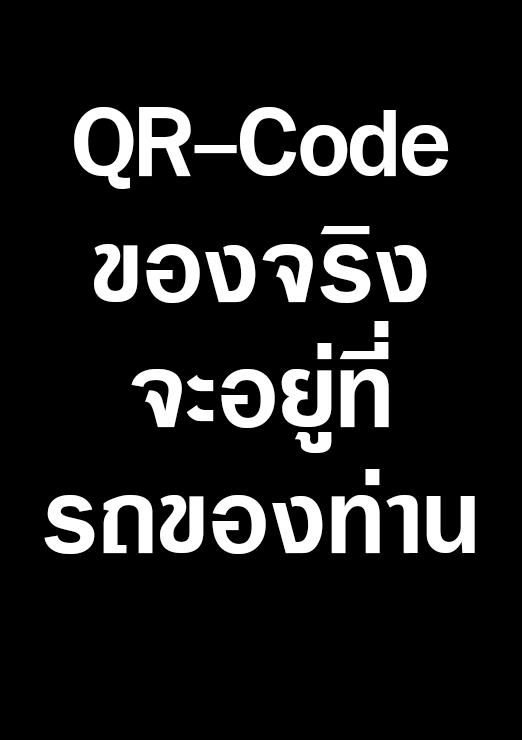
<style>
.page{position:relative;width:522px;height:740px;background:#000000}
.page>*{position:absolute;margin:0}
.t1{font:141.3px/125.6px "DSNLardPhrao";color:#ffffff}
</style>
<div class="page">
<p class="t1" style="left:44px;top:107px;width:431px;height:447px;text-align:center">QR-Code<br>ของจริง<br>จะอยู่ที่<br>รถของท่าน</p>
</div>
